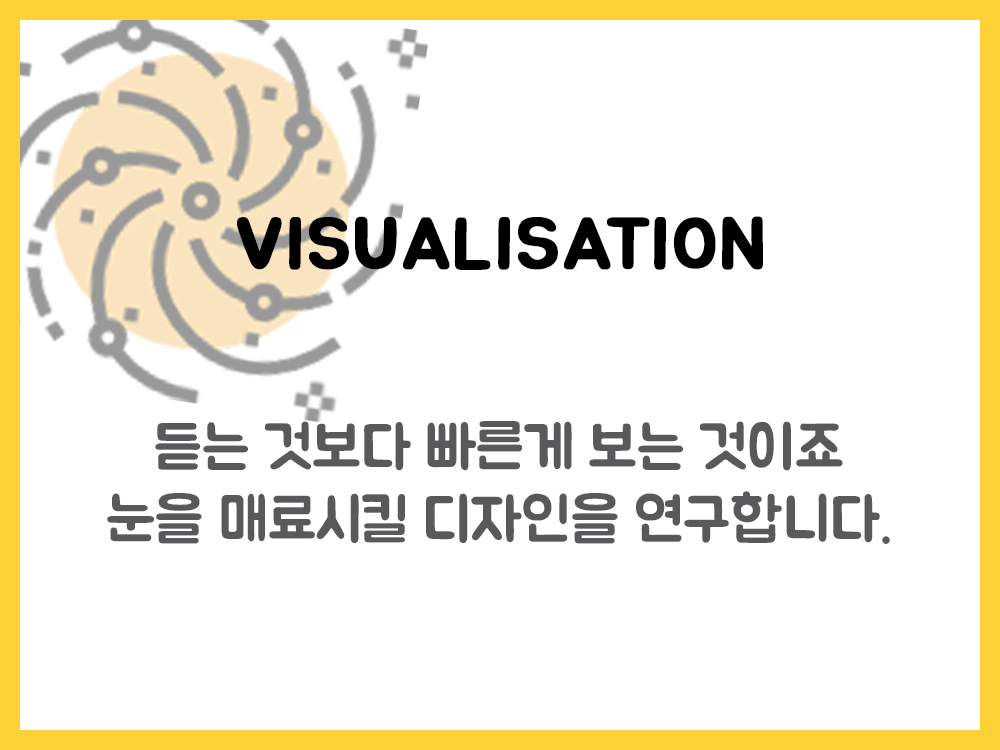
<style>
.page{position:relative;width:1000px;height:750px;background:#ffffff}
.page>*{position:absolute;margin:0}
.t1{font:72px "BMJUA";color:#000000;font-weight:bold}
.t2{font:60px "BMJUA";color:#58595b}
</style>
<div class="page">
<p class="t1" style="left:237px;top:216px;width:526px;height:54px">VISUALISATION</p>
<p class="t2" style="left:107px;top:421px;width:783px;height:123px;text-align:center">듣는 것보다 빠른게 보는 것이죠<br>눈을 매료시킬 디자인을 연구합니다.</p>
</div>
